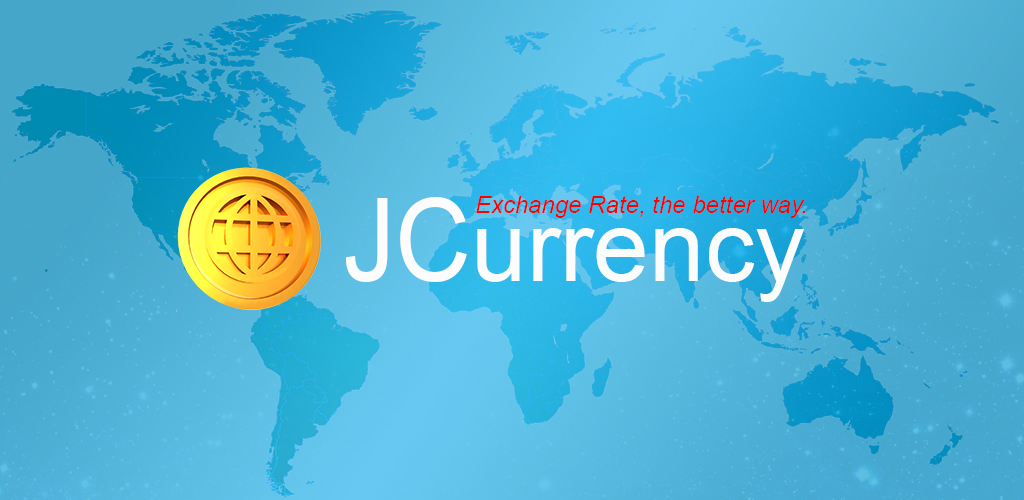
<style>
.page{position:relative;width:1024px;height:500px}
.page>*{position:absolute;margin:0}
.t1{font:115.8px "ArialMT";color:#fcfcfc;scale:0.9 1}
.t2{font:24px "Arial-ItalicMT";color:#ff0000}
.t3{font:100px "ArialMT";color:#fcfcfc}
</style>
<div class="page">
<p class="t1" style="left:346px;top:197px;width:121px;height:85px">JC</p>
<p class="t2" style="left:476px;top:196px;width:330px;height:22px">Exchange Rate, the better way.</p>
<p class="t3" style="left:477px;top:228px;width:327px;height:74px">urrency</p>
</div>
